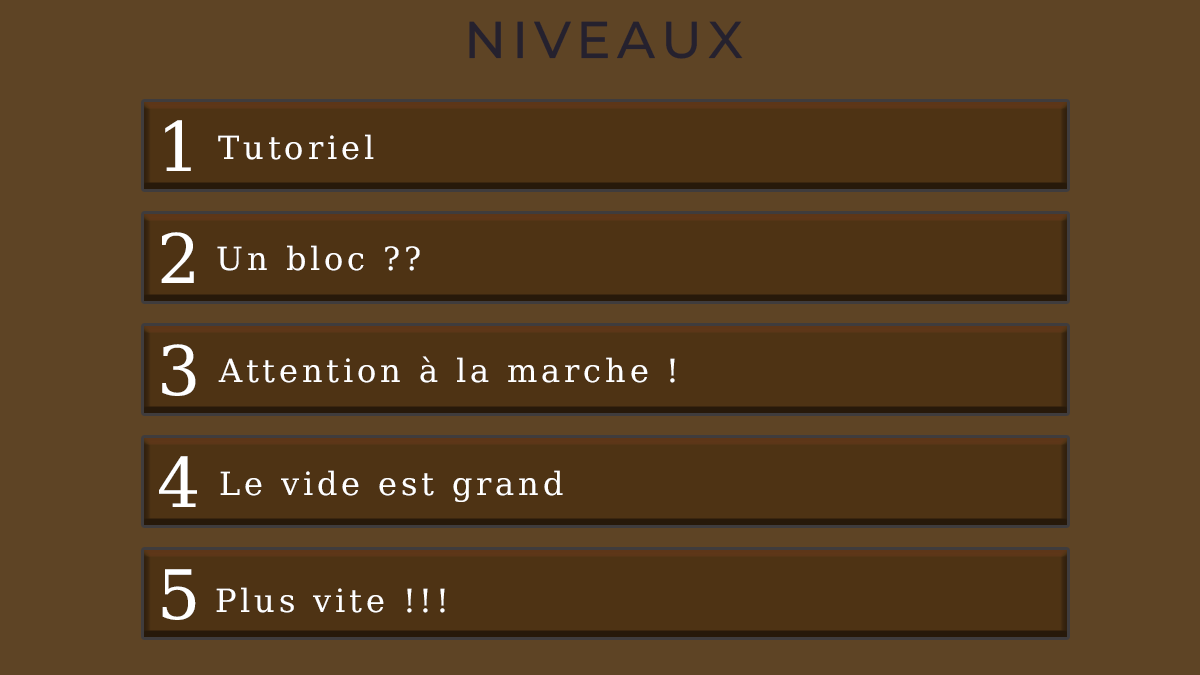
<style>
.page{position:relative;width:1200px;height:675px;background:#5e4425}
.page>*{position:absolute;margin:0}
.t1{font:89px "MontserratRoman-Medium";letter-spacing:0.12em;color:#25212e;text-transform:uppercase}
.t2{font:117px "DejaVuMathTeXGyre-Regular";letter-spacing:0.12em;color:#ffffff;text-transform:uppercase}
.t3{font:55px "DejaVuMathTeXGyre-Regular";letter-spacing:0.12em;color:#ffffff}
</style>
<div class="page">
<p class="t1" style="left:469px;top:21px;width:274px;height:38px">Niveaux</p>
<p class="t2" style="left:165px;top:120px;width:26px;height:51px">1</p>
<p class="t3" style="left:218px;top:134px;width:156px;height:26px">Tutoriel</p>
<p class="t2" style="left:161px;top:232px;width:33px;height:51px">2</p>
<p class="t3" style="left:217px;top:245px;width:203px;height:26px">Un bloc ??</p>
<p class="t2" style="left:162px;top:344px;width:34px;height:52px">3</p>
<p class="t3" style="left:218px;top:356px;width:457px;height:27px">Attention à la marche !</p>
<p class="t2" style="left:159px;top:456px;width:38px;height:51px">4</p>
<p class="t3" style="left:220px;top:470px;width:343px;height:32px">Le vide est grand</p>
<p class="t2" style="left:162px;top:569px;width:34px;height:51px">5</p>
<p class="t3" style="left:216px;top:587px;width:229px;height:26px">Plus vite !!!</p>
</div>
